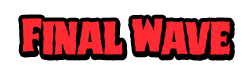
<style>
.page{position:relative;width:252px;height:71px;background:#ffffff}
.page>*{position:absolute;margin:0}
.t1{font:49.9px "DuskDemonStaggered";color:#ff2a32}
</style>
<div class="page">
<p class="t1" style="left:22px;top:18px;width:208px;height:37px">Final Wave</p>
</div>
